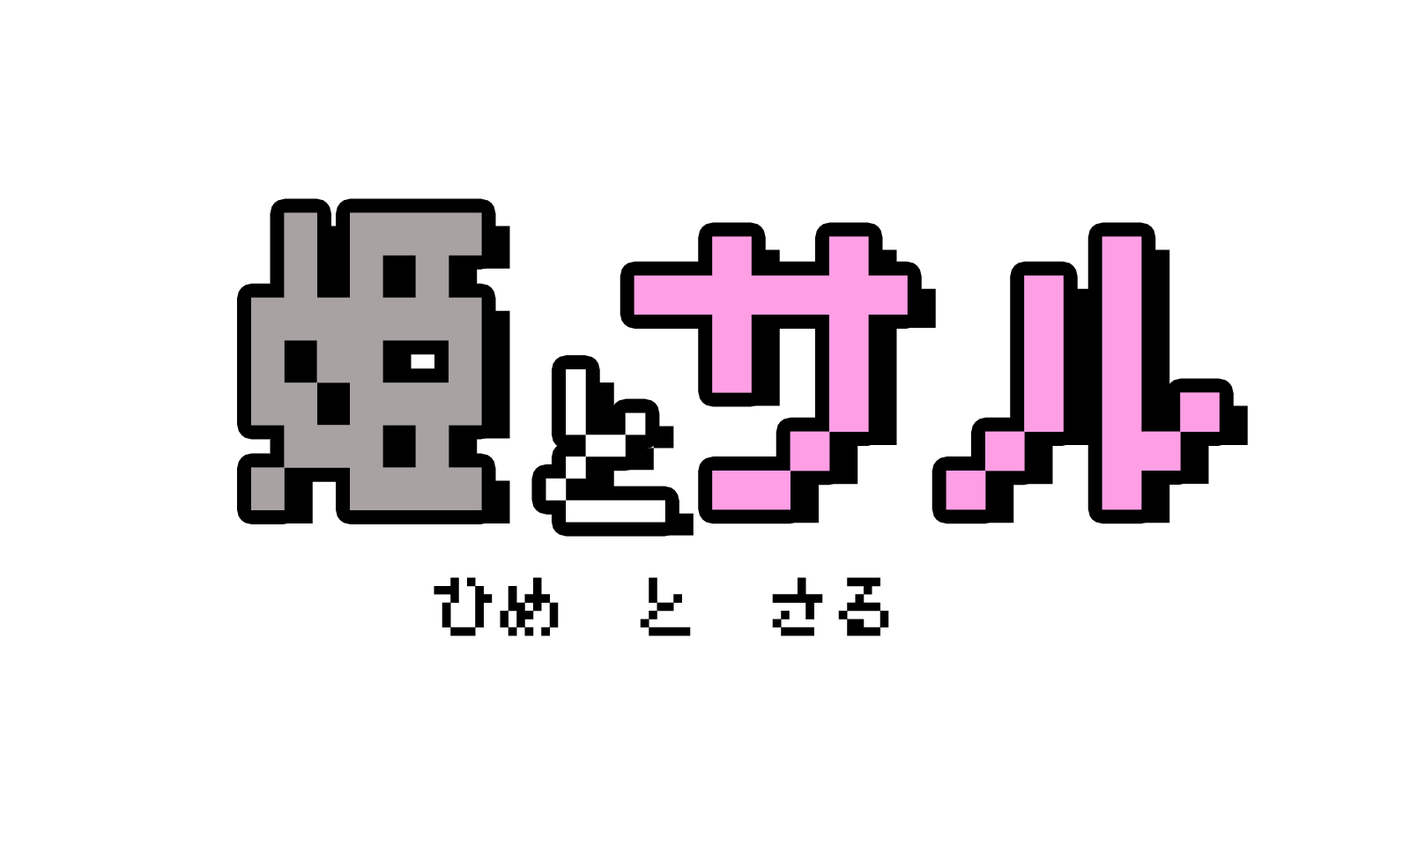
<style>
.page{position:relative;width:1410px;height:846px;background:#ffffff}
.page>*{position:absolute;margin:0}
.t1{font:339.7px "MisakiGothic";color:#a9a2a2;scale:0.77 1}
.t2{font:311.9px "MisakiGothic";color:#fe9fe5}
.t3{font:174.6px "MisakiGothic";color:#ffffff;scale:0.91 1}
.t4{font:66.1px "MisakiGothic";color:#000000}
</style>
<div class="page">
<p class="t1" style="left:251px;top:212px;width:231px;height:298px">姫</p>
<p class="t2" style="left:634px;top:236px;width:585px;height:274px">サル</p>
<p class="t3" style="left:545px;top:369px;width:120px;height:153px">と</p>
<p class="t4" style="left:433px;top:577px;width:456px;height:59px">ひめ  と  さる</p>
</div>
